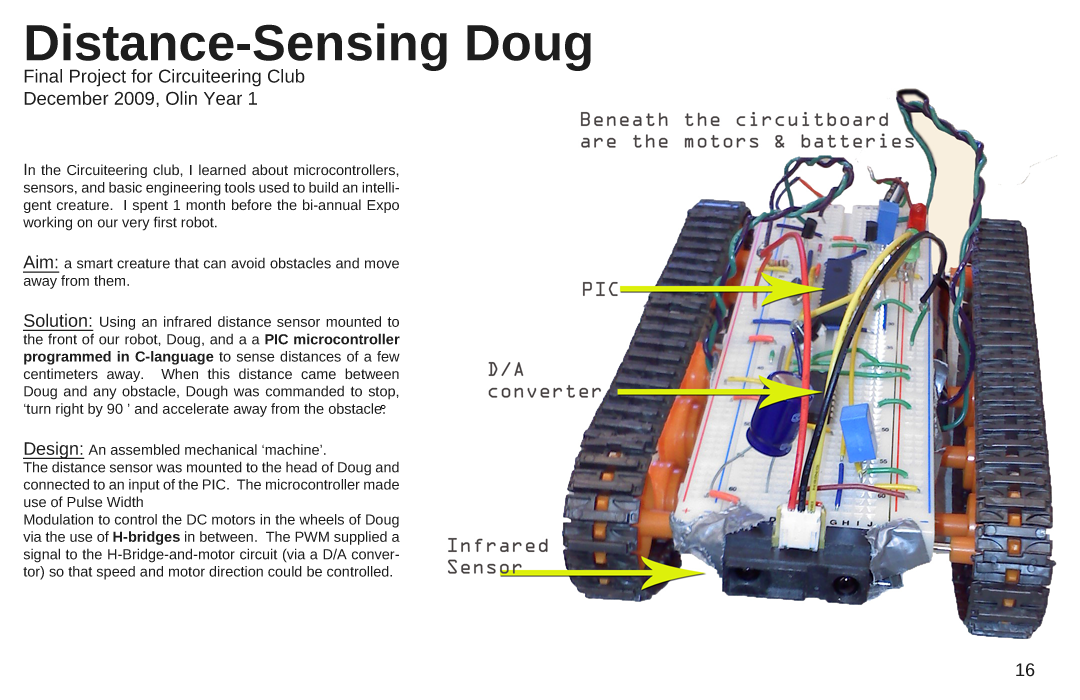
<style>
.page{position:relative;width:1080px;height:700px;background:#ffffff}
.page>*{position:absolute;margin:0}
.t1{font:18.5px "LiberationSans";color:#1d1d1d}
.t2{font:50.9px "LiberationSans-Bold";color:#1d1d1d}
.t3{font:14.5px "LiberationSans";color:#1d1d1d}
.t4{font:16.2px "LiberationSans";color:#1d1d1d}
.t5{font:18px "LiberationSans";color:#1d1d1d;text-decoration:underline}
.t6{font:14.5px "LiberationSans-Bold";color:#1d1d1d}
.t7{font:18px "LiberationSans";color:#1d1d1d}
</style>
<div class="page">
<p class="t1" style="left:24px;top:23px;width:567px;height:84px;text-align:justify"><span class="t2">Distance-Sensing Doug<br></span>Final Project for Circuiteering Club <br>December 2009, Olin Year 1</p>
<p class="t3" style="left:23px;top:163px;width:377px;height:417px;text-align:justify"><span class="t4">I</span>n the Circuiteering club, I learned about microcontrollers, sensors, and basic engineering tools used to build an intelligent creature.  I spent 1 month before the bi-annual Expo working on our very first robot.  <br><br><span class="t5">Aim: </span>a smart creature that can avoid obstacles and move away from them.<br><br><span class="t5">Solution: </span>Using an infrared distance sensor mounted to the front of our robot, Doug, and a a <span class="t6">PIC microcontroller programmed in C-language</span> to sense distances of a few centimeters away.  When this distance came between Doug and any obstacle, Dough was commanded to stop, ‘turn right by 90 ’ and accelerate away from the obstacle.  <br><br><span class="t5">Design: </span>An assembled mechanical ‘machine’.  <br>The distance sensor was mounted to the head of Doug and connected to an input of the PIC.  The microcontroller made use of Pulse Width <br>Modulation to control the DC motors in the wheels of Doug via the use of <span class="t6">H-bridges</span> in between.  The PWM supplied a signal to the H-Bridge-and-motor circuit (via a D/A convertor) so that speed and motor direction could be controlled.</p>
<p class="t7" style="left:1016px;top:663px;width:19px;height:14px">16</p>
</div>
